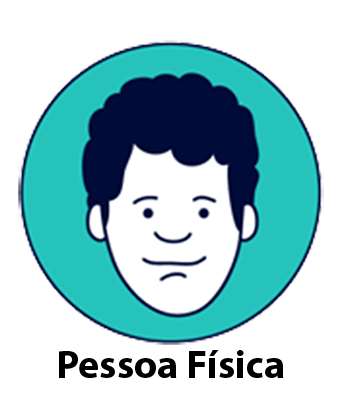
<style>
.page{position:relative;width:350px;height:418px;background:#ffffff}
.page>*{position:absolute;margin:0}
.t1{font:40px "MyriadPro-Bold";color:#000000}
</style>
<div class="page">
<p class="t1" style="left:59px;top:350px;width:225px;height:28px">Pessoa Física</p>
</div>
